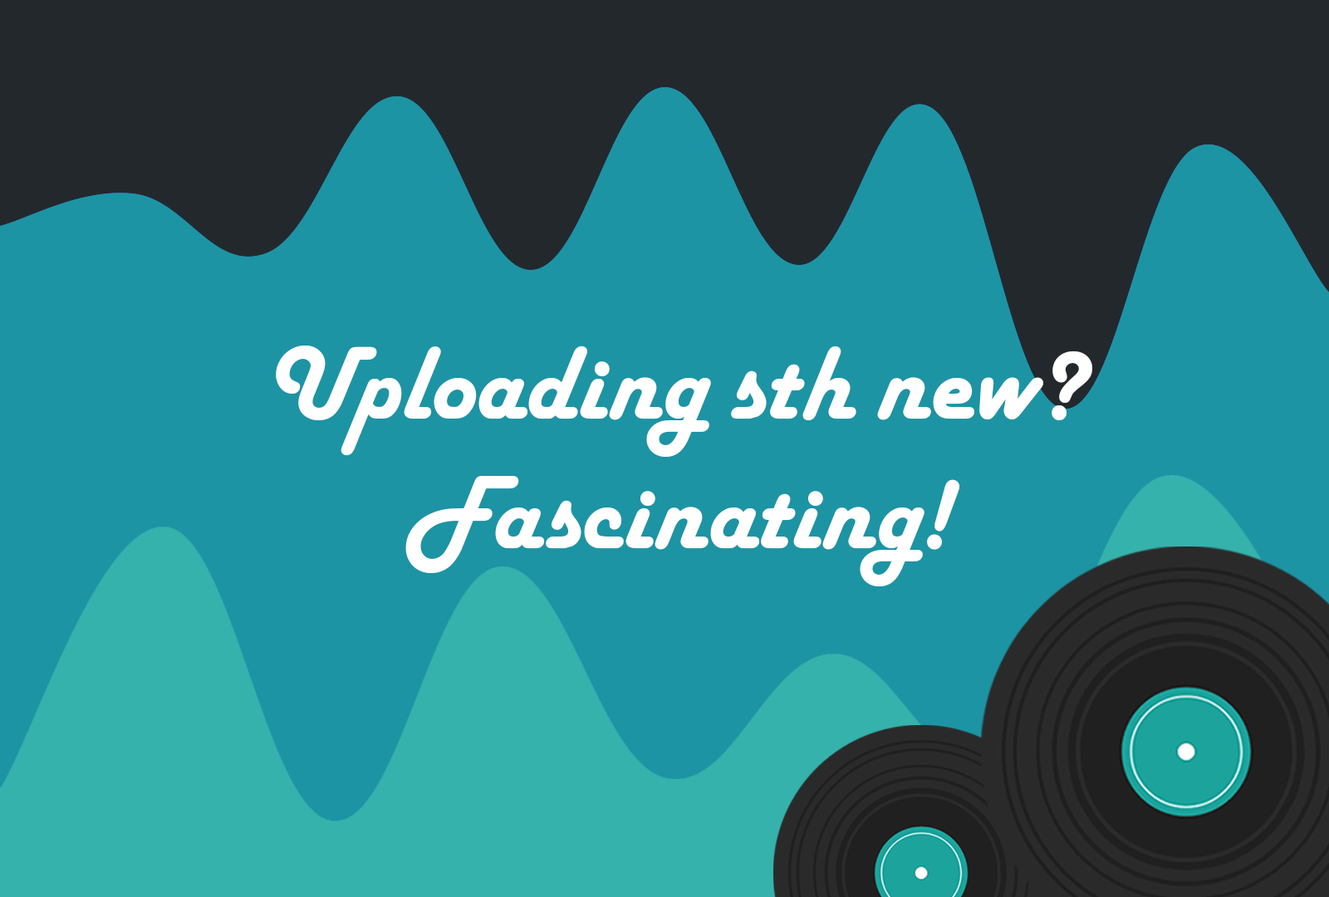
<style>
.page{position:relative;width:1329px;height:897px;background:#1c94a4}
.page>*{position:absolute;margin:0}
.t1{font:108px "HarlowSolidPlain";color:#ffffff}
</style>
<div class="page">
<p class="t1" style="left:276px;top:346px;width:816px;height:240px;text-align:center">Uploading sth new?<br>Fascinating!</p>
</div>
